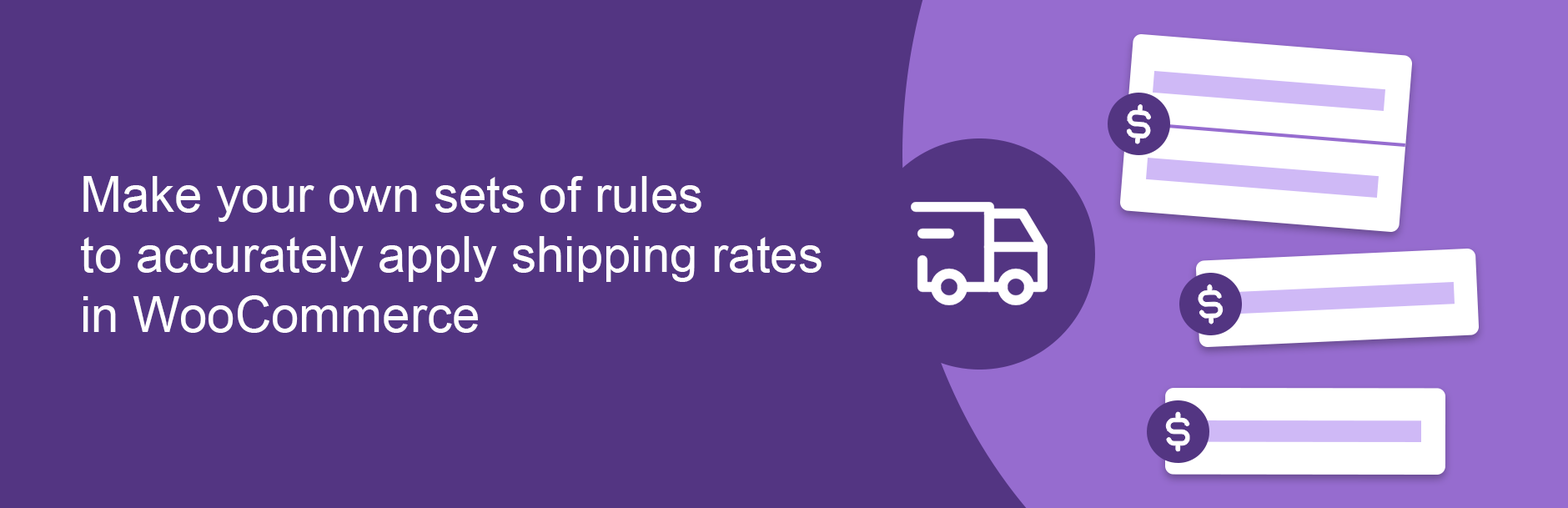
<style>
.page{position:relative;width:1568px;height:508px;background:#533582}
.page>*{position:absolute;margin:0}
.t1{font:50px "ArialMT";color:#ffffff}
</style>
<div class="page">
<p class="t1" style="left:81px;top:176px;width:741px;height:157px">Make your own sets of rules<br>to accurately apply shipping rates<br>in WooCommerce</p>
</div>
